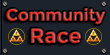
<style>
.page{position:relative;width:110px;height:55px;background:#1c232c}
.page>*{position:absolute;margin:0}
.t1{font:16px "Montserrat-Regular";font-weight:bold}
.t2{font:20px "Montserrat-Regular";font-weight:bold}
</style>
<div class="page">
<p class="t1" style="left:6px;top:8px;width:99px;height:17px">Community</p>
<p class="t2" style="left:31px;top:28px;width:50px;height:16px">Race</p>
</div>
